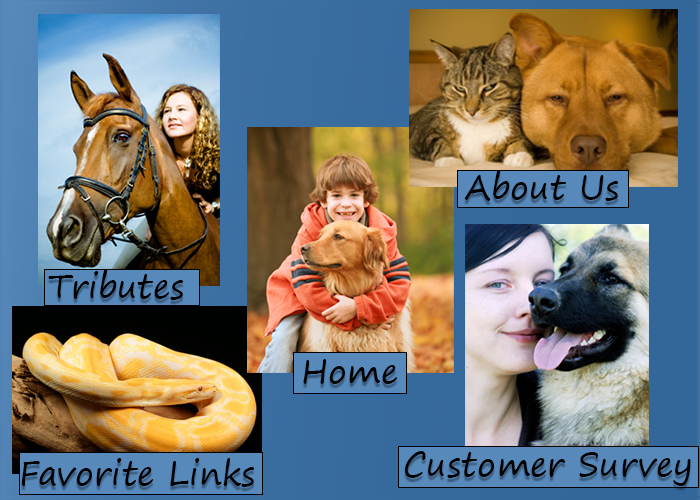
<style>
.page{position:relative;width:700px;height:500px}
.page>*{position:absolute;margin:0}
.t1{font:33.3px "SegoePrint";color:#000000}
</style>
<div class="page">
<p class="t1" style="left:464px;top:170px;width:154px;height:31px">About Us</p>
<p class="t1" style="left:48px;top:269px;width:135px;height:31px">Tributes</p>
<p class="t1" style="left:303px;top:359px;width:94px;height:25px">Home</p>
<p class="t1" style="left:21px;top:458px;width:233px;height:29px">Favorite Links</p>
<p class="t1" style="left:404px;top:451px;width:287px;height:35px">Customer Survey</p>
</div>
